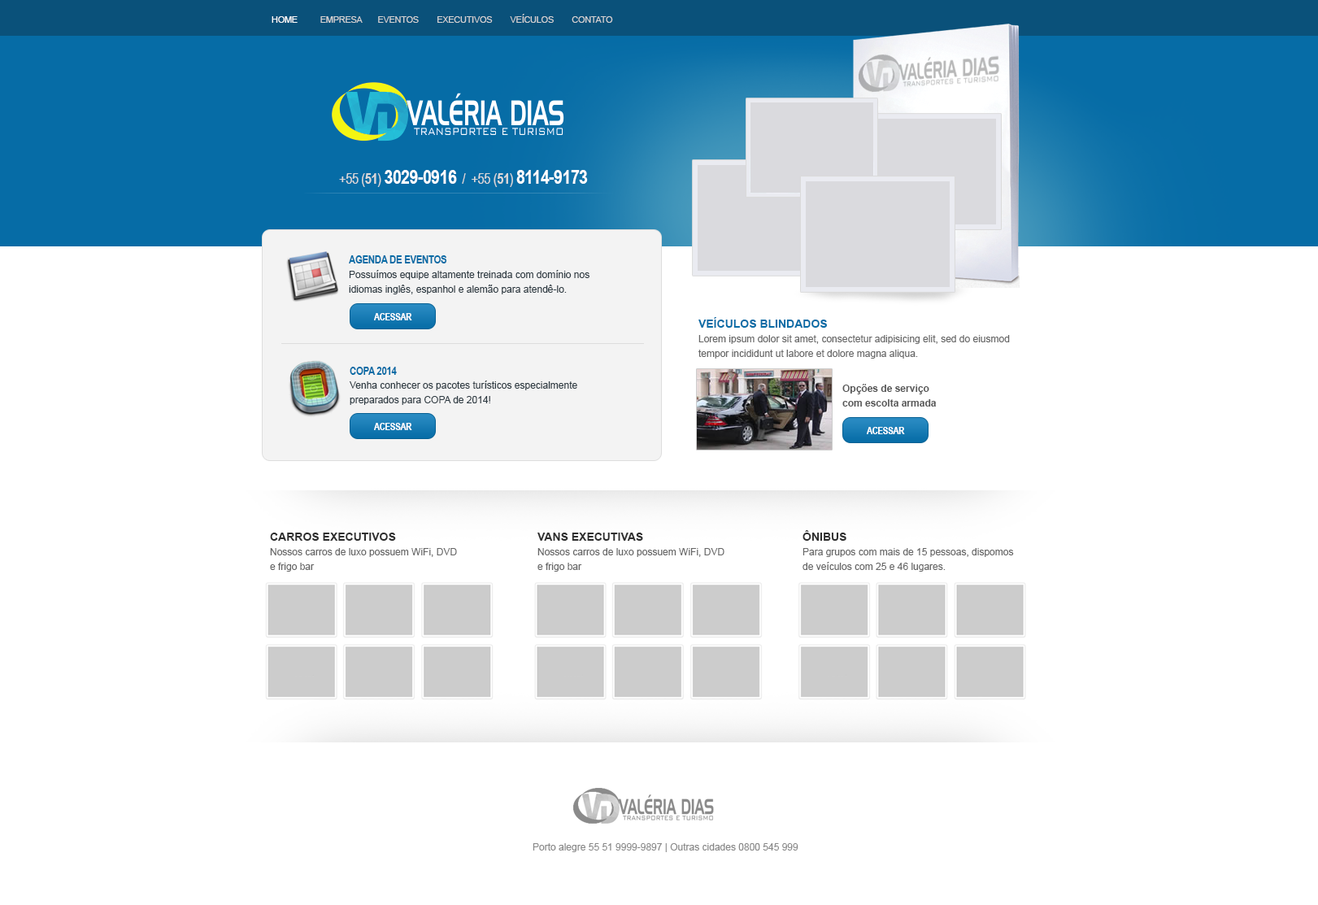
<style>
.page{position:relative;width:1318px;height:905px;background:#ffffff}
.page>*{position:absolute;margin:0}
.t1{font:8.9px "ArialMT";letter-spacing:-0.025em;color:#d4d4d4;text-transform:uppercase}
.t2{font:8.9px "ArialMT";letter-spacing:-0.025em;color:#ffffff;text-transform:uppercase}
.t3{font:19.5px "ArialNarrow-Bold";letter-spacing:-0.025em;color:#ffffff;text-transform:uppercase}
.t4{font:14.6px "ArialNarrow";letter-spacing:-0.025em;color:#d9d9d9;text-transform:uppercase}
.t5{font:14.6px "ArialNarrow-Bold";letter-spacing:-0.025em;color:#d9d9d9;text-transform:uppercase}
.t6{font:11.4px "ArialNarrow-Bold";letter-spacing:-0.025em;color:#066ca6;text-transform:uppercase}
.t7{font:9.8px/14.6px "ArialMT";color:#2d3a42}
.t8{font:9.8px "ArialNarrow-Bold";letter-spacing:-0.025em;color:#ffffff;text-transform:uppercase}
.t9{font:9.8px/14.6px "ArialMT";color:#666666}
.t10{font:11.4px/14.6px "Arial-BoldMT";color:#066ca6;text-transform:uppercase}
.t11{font:9.8px/14.6px "Arial-BoldMT";color:#585858}
.t12{font:11.4px/14.6px "Arial-BoldMT";color:#2c2c2c;text-transform:uppercase}
.t13{font:9.8px "ArialMT";color:#888888}
</style>
<div class="page">
<p class="t1" style="left:272px;top:14px;width:341px;height:9px"><span class="t2">Home          </span>Empresa       Eventos        Executivos        Veículos        Contato</p>
<p class="t3" style="left:339px;top:170px;width:249px;height:17px"><span class="t4">+55 (</span><span class="t5">51</span><span class="t4">) </span>3029-0916  <span class="t4">/  +55 (</span><span class="t5">51</span><span class="t4">) </span>8114-9173</p>
<p class="t6" style="left:349px;top:255px;width:98px;height:8px">AGENDA DE EVENTOS</p>
<p class="t7" style="left:349px;top:270px;width:240px;height:24px">Possuímos equipe altamente treinada com domínio nos idiomas inglês, espanhol e alemão para atendê-lo.</p>
<p class="t8" style="left:374px;top:313px;width:38px;height:7px">ACESSAR</p>
<p class="t9" style="left:698px;top:317px;width:312px;height:42px"><span class="t10">Veículos blindados<br></span>Lorem ipsum dolor sit amet, consectetur adipisicing elit, sed do eiusmod tempor incididunt ut labore et dolore magna aliqua.</p>
<p class="t6" style="left:350px;top:367px;width:47px;height:8px">COPA 2014</p>
<p class="t7" style="left:350px;top:380px;width:227px;height:25px">Venha conhecer os pacotes turísticos especialmente preparados para COPA de 2014!</p>
<p class="t11" style="left:842px;top:384px;width:94px;height:22px">Opções de serviço<br>com escolta armada</p>
<p class="t8" style="left:374px;top:423px;width:38px;height:7px">ACESSAR</p>
<p class="t8" style="left:867px;top:427px;width:38px;height:7px">ACESSAR</p>
<p class="t9" style="left:270px;top:532px;width:187px;height:40px"><span class="t12">Carros executivos<br></span>Nossos carros de luxo possuem WiFi, DVD<br>e frigo bar</p>
<p class="t9" style="left:537px;top:532px;width:187px;height:40px"><span class="t12">VANS executivas<br></span>Nossos carros de luxo possuem WiFi, DVD<br>e frigo bar</p>
<p class="t9" style="left:802px;top:530px;width:212px;height:42px"><span class="t12">ônibus<br></span>Para grupos com mais de 15 pessoas, dispomos de veículos com 25 e 46 lugares.</p>
<p class="t13" style="left:532px;top:843px;width:266px;height:9px">Porto alegre 55 51 9999-9897 | Outras cidades 0800 545 999</p>
</div>
